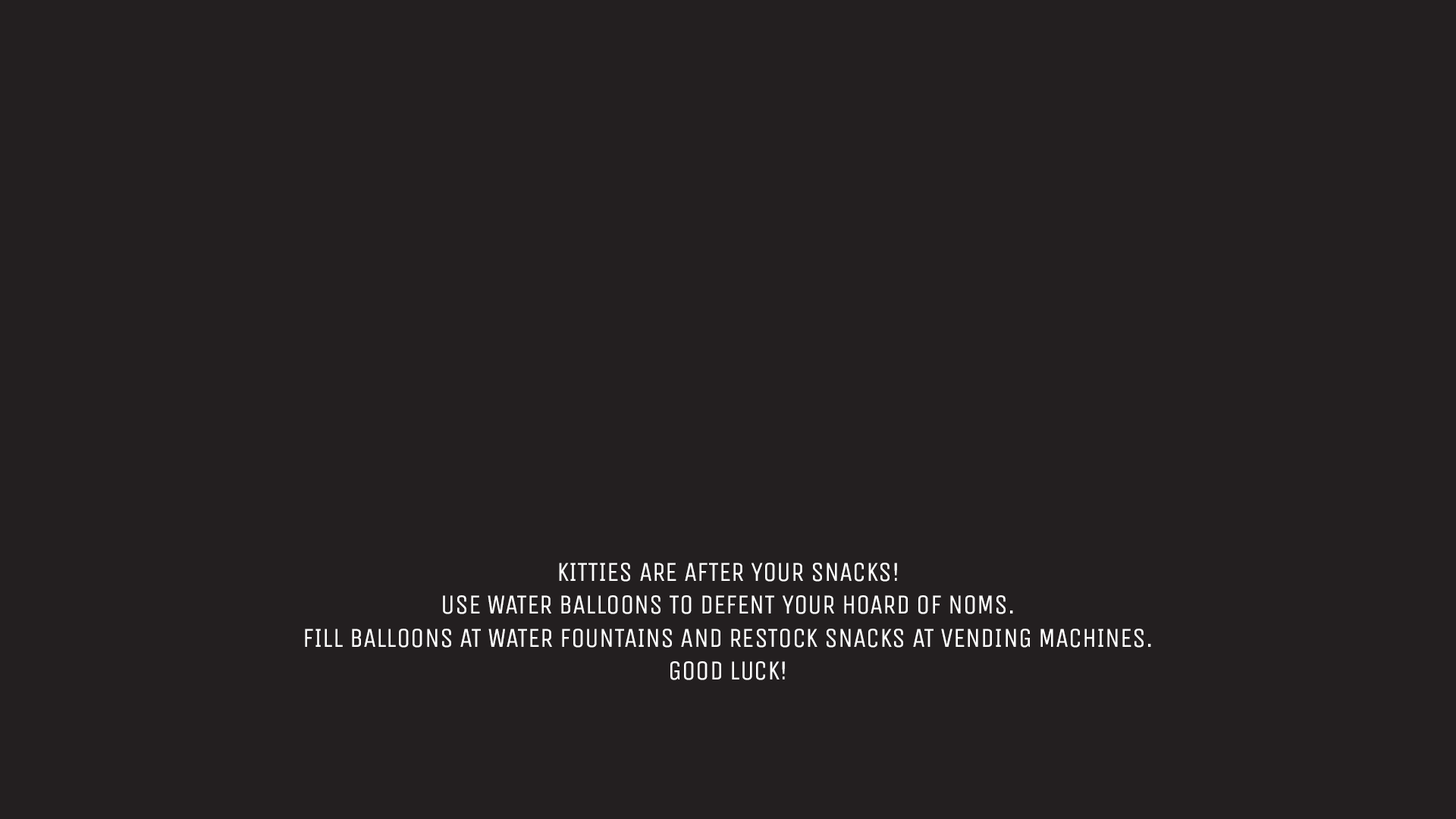
<style>
.page{position:relative;width:1456px;height:819px;background:#231f20}
.page>*{position:absolute;margin:0}
.t1{font:27.3px "UnicaOne-Regular";color:#ffffff}
</style>
<div class="page">
<p class="t1" style="left:305px;top:563px;width:846px;height:117px;text-align:center">KITTIES ARE AFTER YOUR SNACKS!<br>USE WATER BALLOONS TO DEFENT YOUR HOARD OF NOMS.<br>FILL BALLOONS AT WATER FOUNTAINS AND RESTOCK SNACKS AT VENDING MACHINES.<br>GOOD LUCK!</p>
</div>
